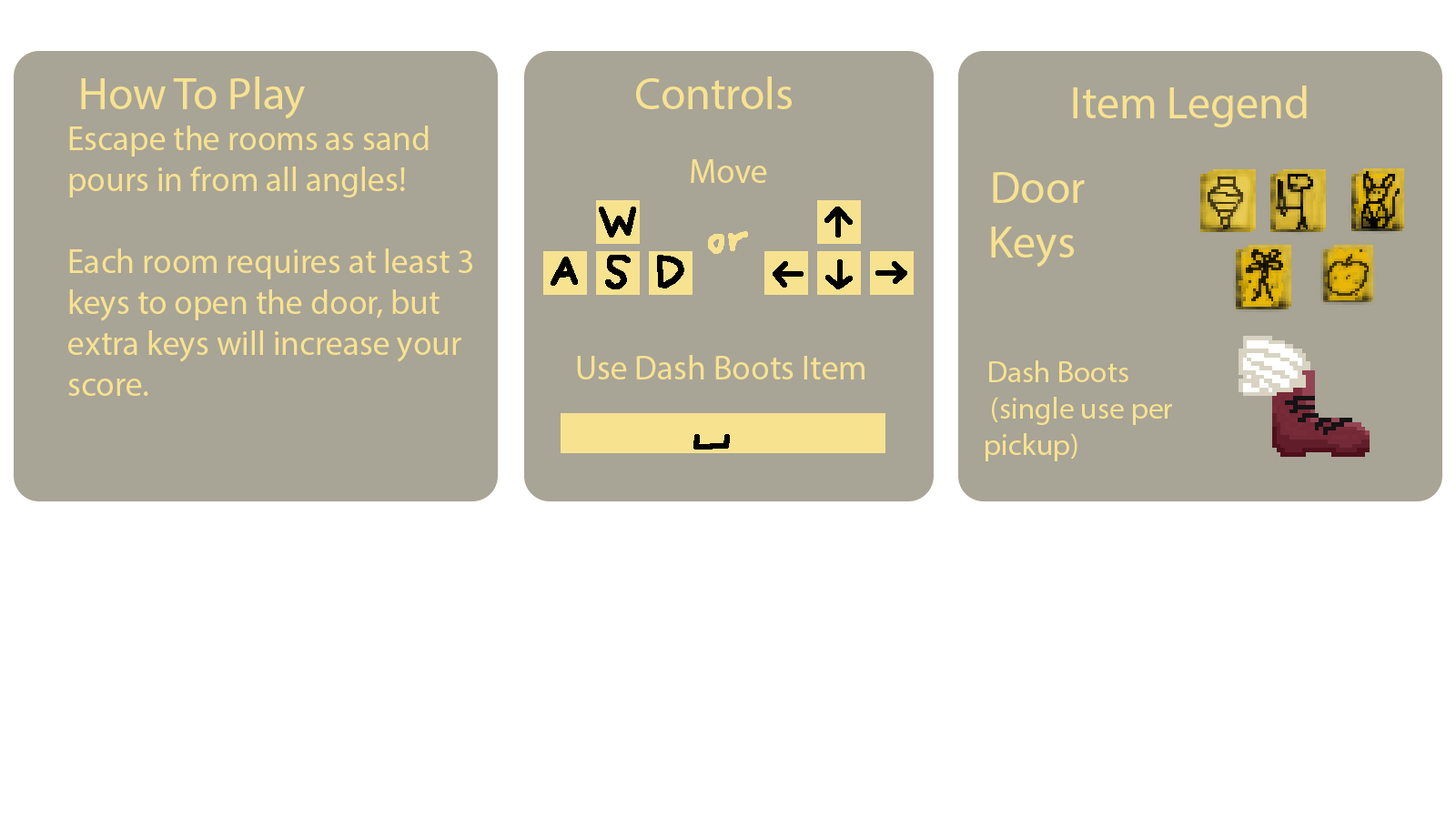
<style>
.page{position:relative;width:1456px;height:819px;background:#ffffff}
.page>*{position:absolute;margin:0}
.t1{font:34.1px "MyriadPro-Regular";color:#f7e290}
.t2{font:45.5px "MyriadPro-Regular";color:#f7e290}
.t3{font:30.3px "MyriadPro-Regular";color:#f7e290}
</style>
<div class="page">
<p class="t1" style="left:68px;top:76px;width:404px;height:320px"><span class="t2">How To Play<br></span>Escape the rooms as sand pours in from all angles! <br><br>Each room requires at least 3 keys to open the door, but extra keys will increase your score.</p>
<p class="t2" style="left:636px;top:76px;width:156px;height:33px">Controls</p>
<p class="t2" style="left:1073px;top:86px;width:234px;height:41px">Item Legend</p>
<p class="t1" style="left:691px;top:159px;width:76px;height:24px">Move</p>
<p class="t2" style="left:991px;top:172px;width:94px;height:96px">Door Keys</p>
<p class="t1" style="left:577px;top:355px;width:287px;height:24px">Use Dash Boots Item</p>
<p class="t3" style="left:986px;top:360px;width:186px;height:101px">Dash Boots<br> (single use per pickup)</p>
</div>
